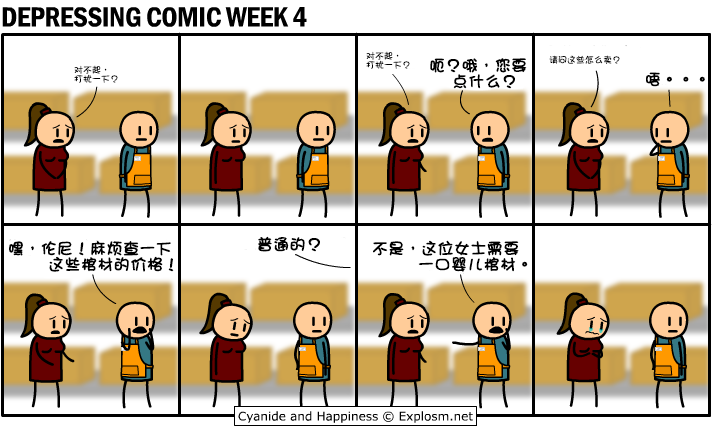
<style>
.page{position:relative;width:712px;height:427px;background:#ffffff}
.page>*{position:absolute;margin:0}
.t1{font:9px/9px "DFGirl";color:#000000}
.t2{font:16px/16px "DFGirl";color:#000000;font-weight:bold}
.t3{font:9px "DFGirl";color:#000000}
.t4{font:16px "DFGirl";color:#000000;font-weight:bold}
</style>
<div class="page">
<p class="t1" style="left:366px;top:51px;width:44px;height:18px">对不起，<br>打扰一下？</p>
<p class="t1" style="left:74px;top:65px;width:44px;height:18px">对不起，<br>打扰一下？</p>
<p class="t2" style="left:430px;top:58px;width:97px;height:31px">呃？哦，您要<br>    点什么？</p>
<p class="t3" style="left:549px;top:55px;width:71px;height:9px">请问这些怎么卖？</p>
<p class="t4" style="left:646px;top:72px;width:59px;height:15px">唔。。。</p>
<p class="t2" style="left:9px;top:241px;width:165px;height:31px">嘿，伦尼！麻烦查一下<br>       这些棺材的价格！</p>
<p class="t4" style="left:258px;top:236px;width:62px;height:16px">普通的？</p>
<p class="t2" style="left:373px;top:240px;width:155px;height:32px">不是，这位女士需要<br>        一口婴儿棺材。</p>
</div>
